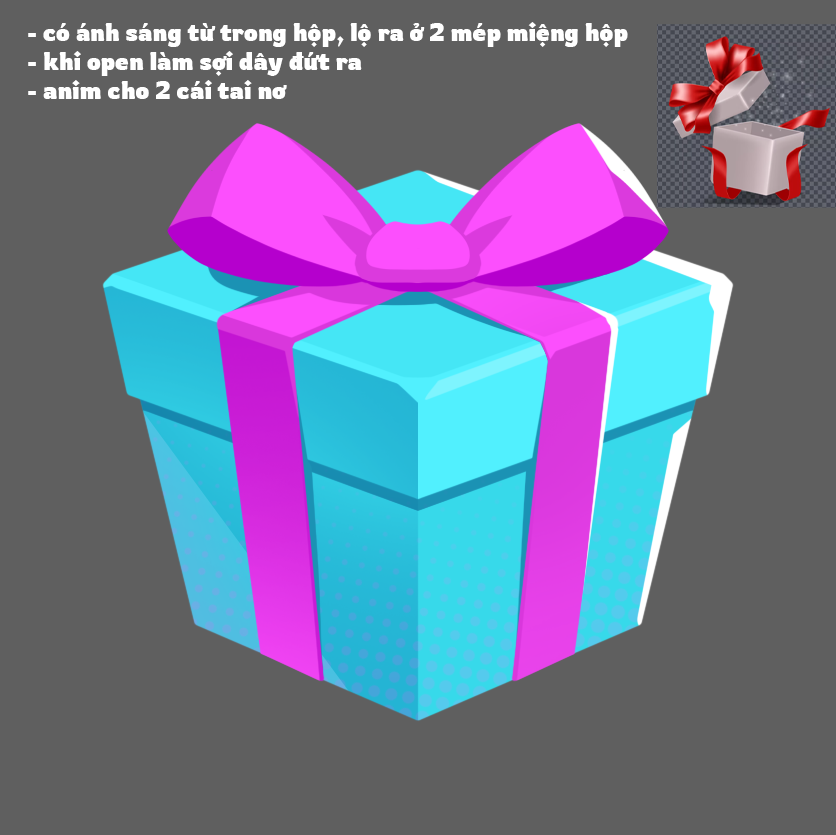
<style>
.page{position:relative;width:836px;height:835px;background:#5f5f5f}
.page>*{position:absolute;margin:0}
.t1{font:24.2px "Rowdies-Bold";color:#ffffff}
</style>
<div class="page">
<p class="t1" style="left:28px;top:22px;width:600px;height:77px">- có ánh sáng từ trong hộp, lộ ra ở 2 mép miệng hộp<br>- khi open làm sợi dây đứt ra<br>- anim cho 2 cái tai nơ</p>
</div>
